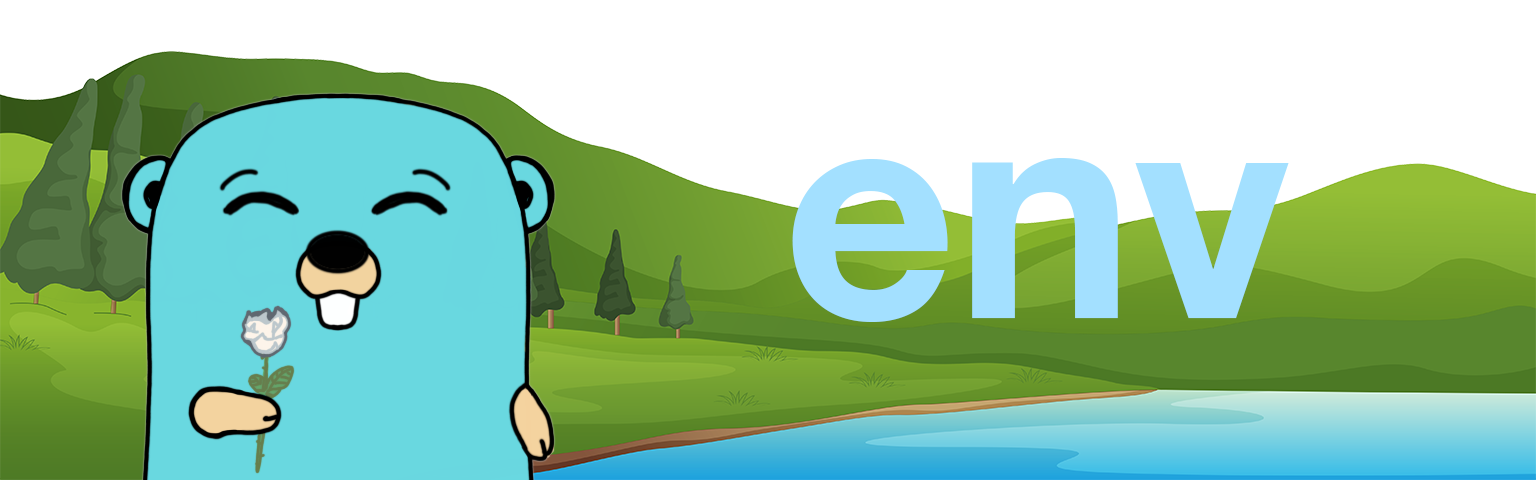
<style>
.page{position:relative;width:1536px;height:480px;background:#ffffff}
.page>*{position:absolute;margin:0}
.t1{font:300px "HelveticaNeue-Bold";color:#a3e0ff}
</style>
<div class="page">
<p class="t1" style="left:792px;top:158px;width:497px;height:164px">env</p>
</div>
